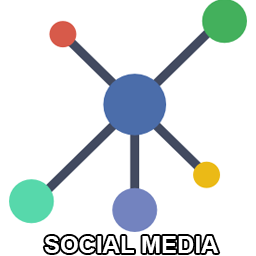
<style>
.page{position:relative;width:256px;height:256px;background:#ffffff}
.page>*{position:absolute;margin:0}
.t1{font:24px "Arial-BoldMT";color:#ffffff}
</style>
<div class="page">
<p class="t1" style="left:44px;top:236px;width:175px;height:17px">SOCIAL MEDIA</p>
</div>
